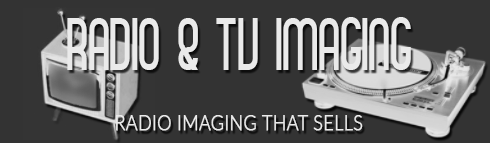
<style>
.page{position:relative;width:490px;height:143px;background:#333333}
.page>*{position:absolute;margin:0}
.t1{font:57.6px "MadameButterfly";letter-spacing:-0.05em;color:#eaeaea;text-transform:uppercase;scale:0.83 1}
.t2{font:21.4px "Lato-Light";color:#eaeaea;text-transform:uppercase;font-weight:bold;scale:0.83 1}
</style>
<div class="page">
<p class="t1" style="left:67px;top:17px;width:344px;height:53px">Radio &amp; tv imaging</p>
<p class="t2" style="left:116px;top:115px;width:247px;height:16px">radio imaging that sells</p>
</div>
